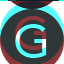
<style>
.page{position:relative;width:64px;height:64px;background:#2f3739}
.page>*{position:absolute;margin:0}
.t1{font:48px "Avenir-Roman"}
</style>
<div class="page">
<p class="t1" style="left:15px;top:15px;width:32px;height:34px">G</p>
</div>
